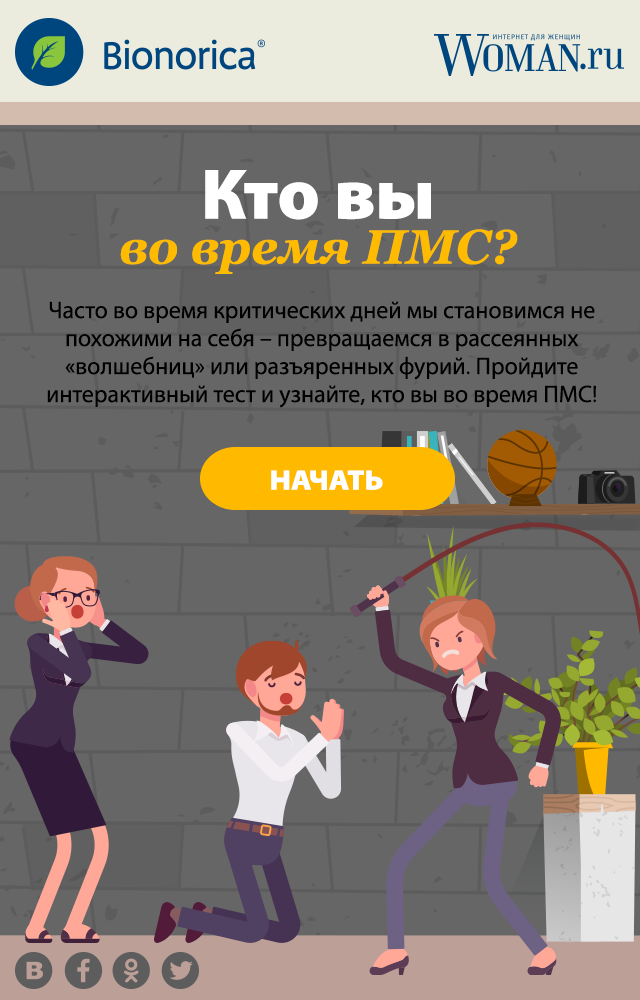
<style>
.page{position:relative;width:640px;height:1000px;background:#666666}
.page>*{position:absolute;margin:0}
.t1{font:48px/45px "Georgia-BoldItalic";color:#ffbb00}
.t2{font:72px/45px "MyriadPro-Black";color:#ffffff}
.t3{font:24px/28px "MyriadPro-Regular";color:#000000}
.t4{font:28px "MyriadPro-BlackSemiExt";color:#ffffff;text-transform:uppercase}
</style>
<div class="page">
<p class="t1" style="left:120px;top:170px;width:398px;height:104px;text-align:center"><span class="t2">Кто вы <br></span>во время ПМС?</p>
<p class="t3" style="left:47px;top:301px;width:550px;height:107px;text-align:center">Часто во время критических дней мы становимся не похожими на себя – превращаемся в рассеянных «волшебниц» или разъяренных фурий. Пройдите интерактивный тест и узнайте, кто вы во время ПМС!</p>
<p class="t4" style="left:271px;top:470px;width:112px;height:20px">Начать</p>
</div>
